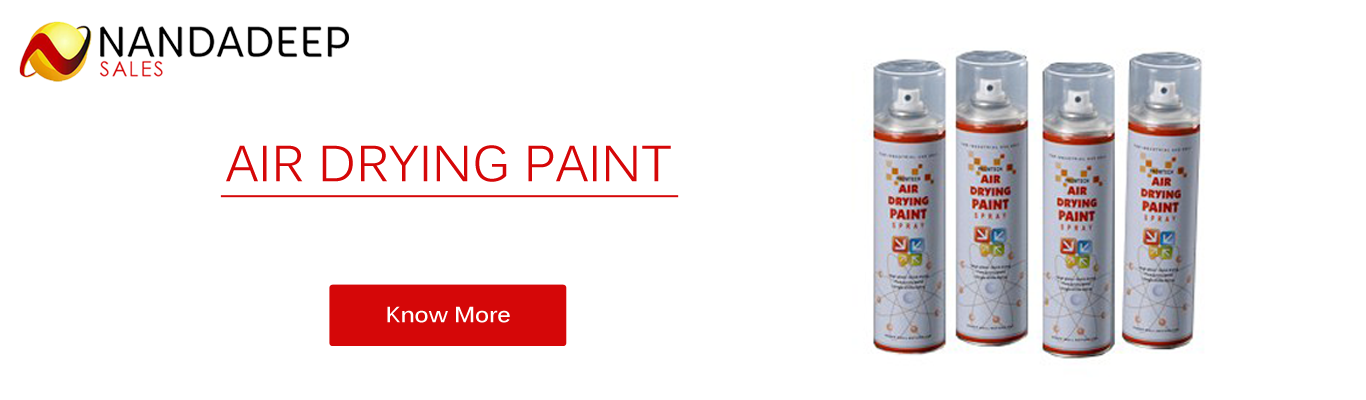
<style>
.page{position:relative;width:1366px;height:400px;background:#ffffff}
.page>*{position:absolute;margin:0}
.t1{font:50px "Kalinga";color:#d50708}
.t2{font:22px "Kalinga-Bold";color:#ffffff}
</style>
<div class="page">
<p class="t1" style="left:226px;top:145px;width:445px;height:37px">AIR DRYING PAINT</p>
<p class="t2" style="left:387px;top:306px;width:123px;height:17px">Know More</p>
</div>
